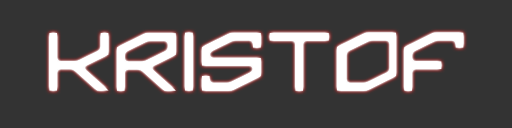
<style>
.page{position:relative;width:512px;height:128px;background:#333333}
.page>*{position:absolute;margin:0}
.t1{font:82px "KinineAlpha";color:#ffffff}
</style>
<div class="page">
<p class="t1" style="left:49px;top:32px;width:415px;height:59px">Kristof</p>
</div>
